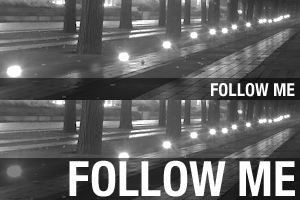
<style>
.page{position:relative;width:300px;height:200px}
.page>*{position:absolute;margin:0}
.t1{font:18px "HelveticaNeue-CondensedBold";color:#ffffff}
.t2{font:48.5px "HelveticaNeue-CondensedBold";color:#ffffff}
</style>
<div class="page">
<p class="t1" style="left:211px;top:83px;width:84px;height:14px">FOLLOW ME</p>
<p class="t2" style="left:69px;top:160px;width:226px;height:37px">FOLLOW ME</p>
</div>
